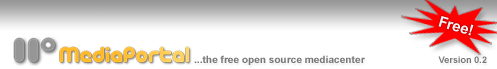
<style>
.page{position:relative;width:497px;height:69px;background:#ffffff}
.page>*{position:absolute;margin:0}
.t1{font:15px "Arial-BoldMT";color:#f2f2f2}
.t2{font:10px "Arial-BoldMT";color:#787878}
.t3{font:9px "Arial-BoldMT";color:#787878}
</style>
<div class="page">
<p class="t1" style="left:438px;top:16px;width:36px;height:20px;rotate:16deg">Free!</p>
<p class="t2" style="left:194px;top:55px;width:171px;height:10px">...the free open source mediacenter</p>
<p class="t3" style="left:438px;top:56px;width:49px;height:7px">Version 0.2</p>
</div>
